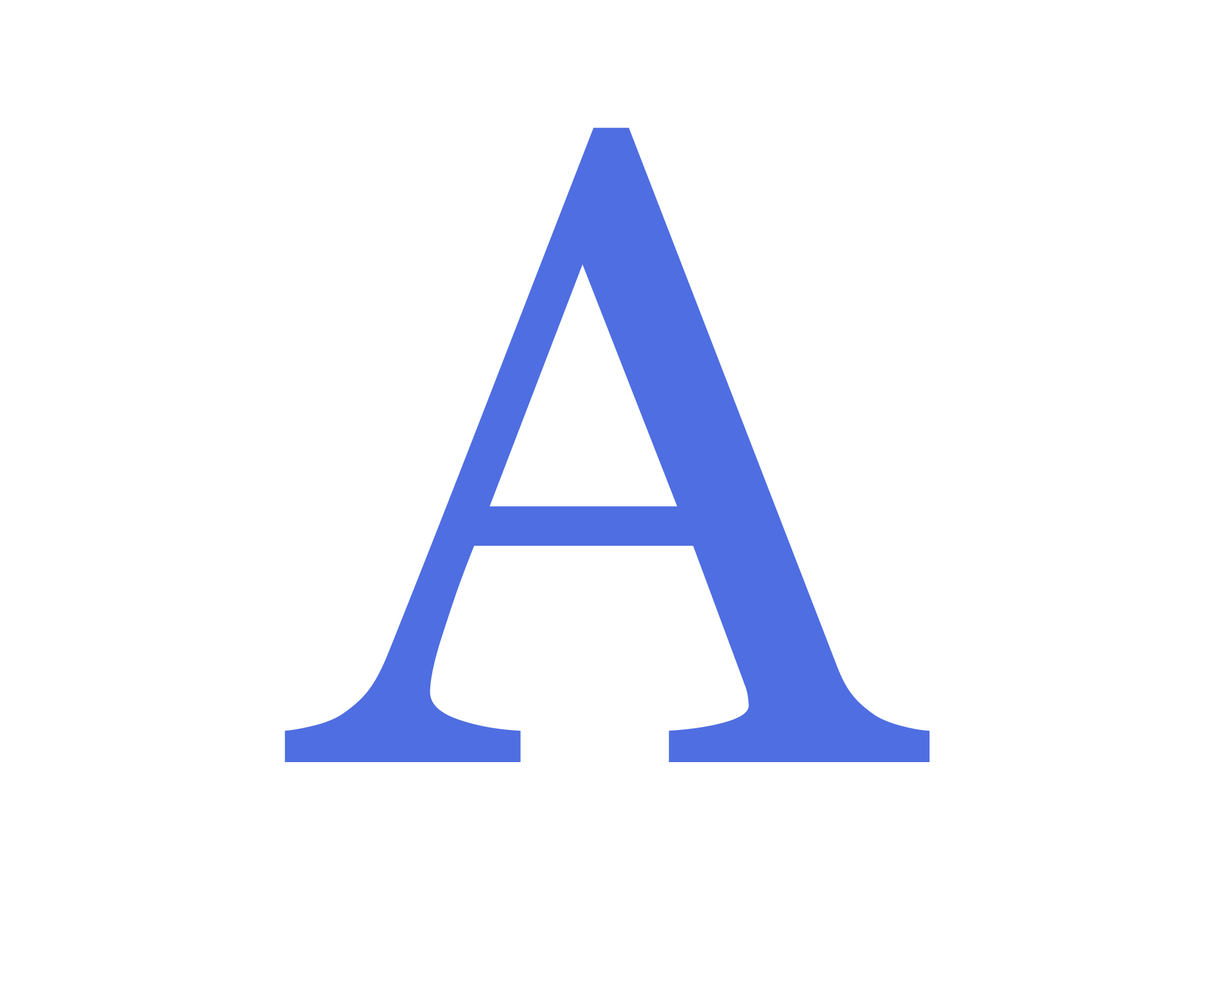
<style>
.page{position:relative;width:1212px;height:984px;background:#ffffff}
.page>*{position:absolute;margin:0}
.t1{font:902.7px "Georgia";color:#4f6ee1}
</style>
<div class="page">
<p class="t1" style="left:284px;top:127px;width:646px;height:635px">A</p>
</div>
